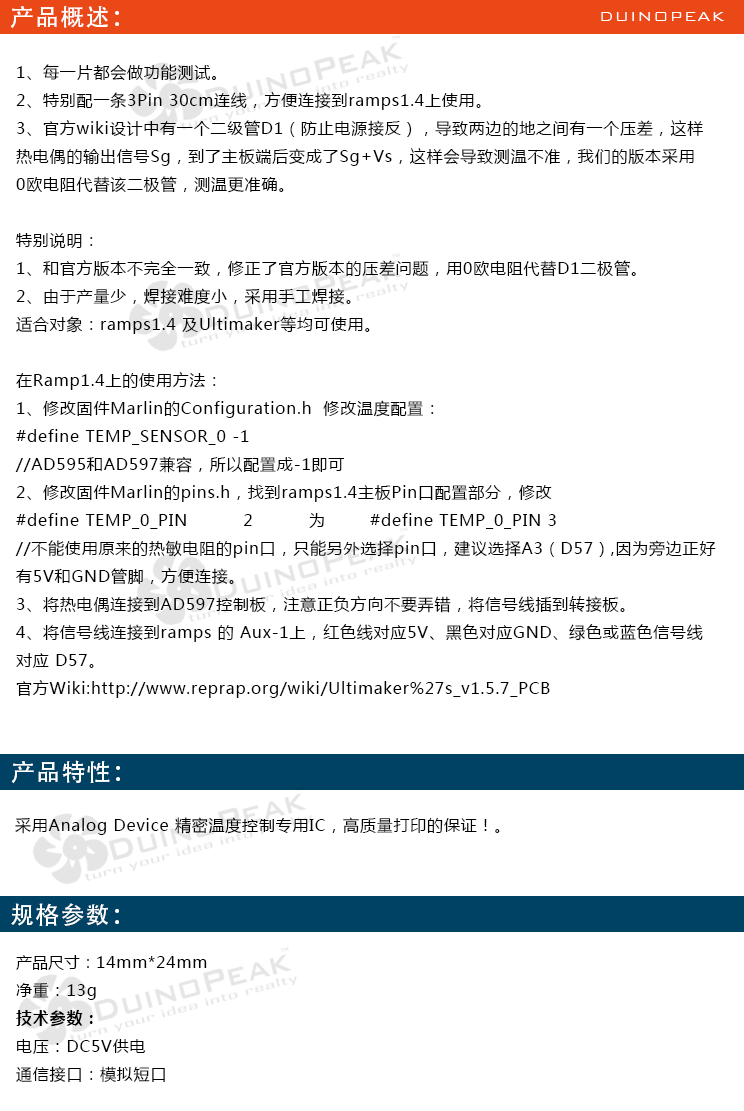
<style>
.page{position:relative;width:744px;height:1111px;background:#ffffff}
.page>*{position:absolute;margin:0}
.t1{font:24px "AdobeHeitiStd-Regular";letter-spacing:0.05em;color:#ffffff}
.t2{font:18px "BankGothicBT-Light";letter-spacing:0.05em;color:#ffffff}
.t3{font:16px "MicrosoftYaHei";letter-spacing:0.05em;color:#000000}
.t4{font:16px "MicrosoftYaHei";color:#000000}
.t5{font:16px "MicrosoftYaHei-Bold";letter-spacing:0.05em;color:#000000}
</style>
<div class="page">
<p class="t1" style="left:10px;top:6px;width:109px;height:23px">产品概述：</p>
<p class="t2" style="left:601px;top:12px;width:124px;height:9px">DUINOPEAK</p>
<p class="t3" style="left:15px;top:64px;width:701px;height:634px">1、每一片都会做功能测试。<br>2、特别配一条3Pin 30cm连线，方便连接到ramps1.4上使用。<br>3、官方wiki设计中有一个二级管D1（防止电源接反），导致两边的地之间有一个压差，这样<br>热电偶的输出信号Sg，到了主板端后变成了Sg+Vs，这样会导致测温不准，我们的版本采用<br>0欧电阻代替该二极管，测温更准确。<br><br>特别说明：<br>1、和官方版本不完全一致，修正了官方版本的压差问题，用0欧电阻代替D1二极管。<br>2、由于产量少，焊接难度小，采用手工焊接。<br>适合对象：ramps1.4 及Ultimaker等均可使用。 <br><br>在Ramp1.4上的使用方法：<br>1、修改固件Marlin的Configuration.h  修改温度配置：<br>#define TEMP_SENSOR_0 -1 <br>//AD595和AD597兼容，所以配置成-1即可<br>2、修改固件Marlin的pins.h，找到ramps1.4主板Pin口配置部分，修改<br>#define TEMP_0_PIN          2          为        #define TEMP_0_PIN 3<br>//不能使用原来的热敏电阻的pin口，只能另外选择pin口，建议选择A3（D57）,因为旁边正好<br>有5V和GND管脚，方便连接。<br>3、将热电偶连接到AD597控制板，注意正负方向不要弄错，将信号线插到转接板。  <br>4、将信号线连接到ramps 的 Aux-1上，红色线对应5V、黑色对应GND、绿色或蓝色信号线<br>对应 D57。<br>官方Wiki:http://www.reprap.org/wiki/Ultimaker%27s_v1.5.7_PCB</p>
<p class="t1" style="left:11px;top:760px;width:109px;height:24px">产品特性：</p>
<p class="t3" style="left:15px;top:817px;width:485px;height:18px">采用Analog Device 精密温度控制专用IC，高质量打印的保证！。</p>
<p class="t1" style="left:11px;top:903px;width:108px;height:23px">规格参数：</p>
<p class="t3" style="left:16px;top:955px;width:191px;height:127px"><span class="t4">产品尺寸：</span>14mm*24mm<br>净重：13g<br><span class="t5">技术参数：<br></span>电压：DC5V供电<br>通信接口：模拟短口</p>
</div>
